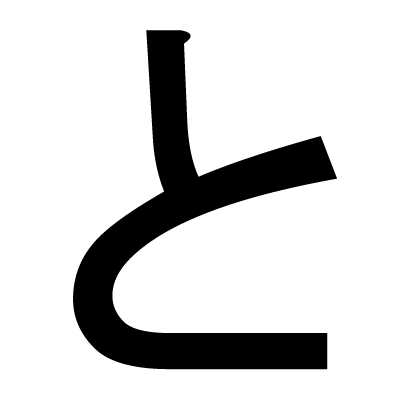
<style>
.page{position:relative;width:400px;height:400px;background:#ffffff}
.page>*{position:absolute;margin:0}
.t1{font:416.7px "MS-PGothic";color:#000000}
</style>
<div class="page">
<p class="t1" style="left:73px;top:30px;width:264px;height:340px">と</p>
</div>
